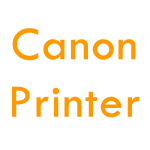
<style>
.page{position:relative;width:150px;height:150px;background:#ffffff}
.page>*{position:absolute;margin:0}
.t1{font:48px/18px "TwCenMT-Regular";color:#ff9900;font-weight:bold}
.t2{font:48px "TwCenMT-Regular";color:#ff9900;font-weight:bold}
</style>
<div class="page">
<p class="t1" style="left:12px;top:28px;width:128px;height:90px;text-align:center">Canon<br>Pr<span class="t2">inte</span>r</p>
</div>
